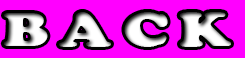
<style>
.page{position:relative;width:245px;height:58px;background:#ff00ff}
.page>*{position:absolute;margin:0}
.t1{font:48.8px "CooperBlack";letter-spacing:0.18em;color:#ffffff;scale:1.29 1}
</style>
<div class="page">
<p class="t1" style="left:3px;top:12px;width:228px;height:35px">BACK</p>
</div>
